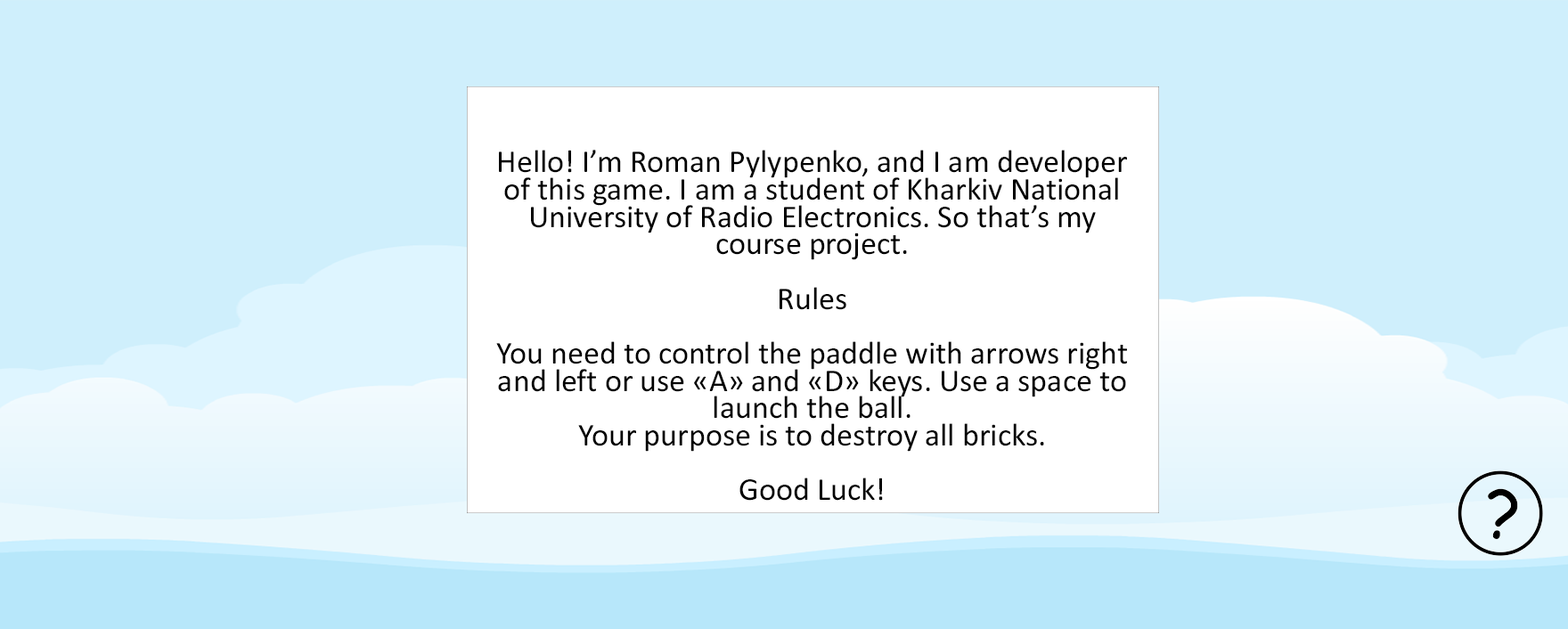
<style>
.page{position:relative;width:1568px;height:629px;background:#cfeffc}
.page>*{position:absolute;margin:0}
.t1{font:32.1px/27.3px "Calibri";color:#000000}
</style>
<div class="page">
<p class="t1" style="left:496px;top:150px;width:631px;height:351px;text-align:center">Hello! I’m Roman Pylypenko, and I am developer of this game. I am a student of Kharkiv National University of Radio Electronics. So that’s my course project.<br><br>Rules<br><br>You need to control the paddle with arrows right and left or use «A» and «D» keys. Use a space to launch the ball.<br>Your purpose is to destroy all bricks. <br> <br>Good Luck!</p>
</div>
